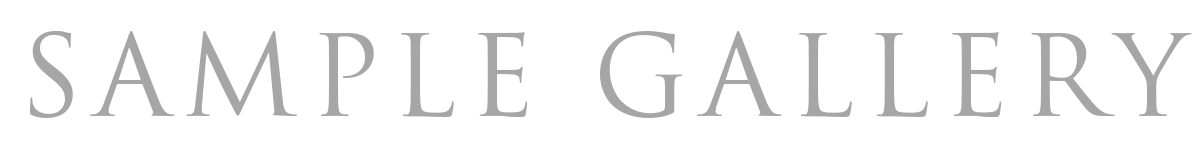
<style>
.page{position:relative;width:1200px;height:150px;background:#ffffff}
.page>*{position:absolute;margin:0}
.t1{font:111.2px "TrajanPro3-Regular";letter-spacing:0.1em;color:#a6a6a6}
</style>
<div class="page">
<p class="t1" style="left:30px;top:30px;width:1162px;height:88px">SAMPLE GALLERY</p>
</div>
